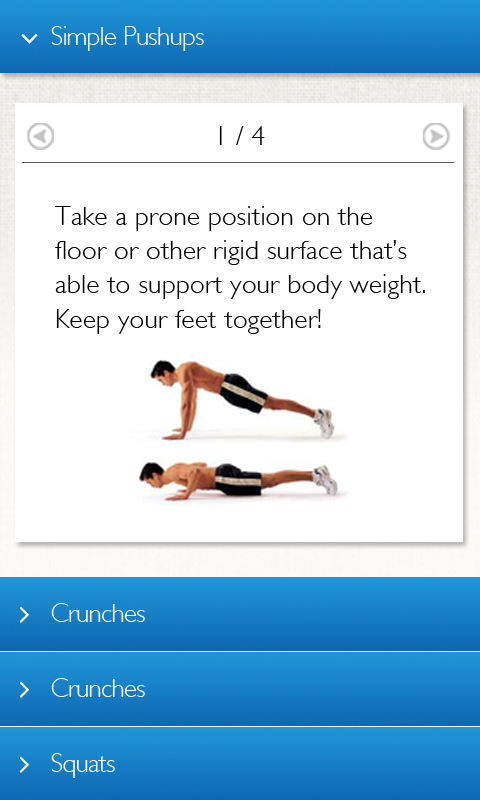
<style>
.page{position:relative;width:480px;height:800px;background:#ffffff}
.page>*{position:absolute;margin:0}
.t1{font:27px "GillSans-Light";letter-spacing:-0.03em;color:#ffffff}
.t2{font:27px "GillSans-Light";letter-spacing:0.01em;color:#000000}
.t3{font:27px/34.2px "GillSans-Light";letter-spacing:0.01em;color:#000000}
</style>
<div class="page">
<p class="t1" style="left:51px;top:26px;width:153px;height:25px">Simple Pushups</p>
<p class="t2" style="left:219px;top:126px;width:46px;height:19px">1 / 4</p>
<p class="t3" style="left:55px;top:206px;width:370px;height:128px">Take a prone position on the <br>floor or other rigid surface that’s<br>able to support your body weight.<br>Keep your feet together!</p>
<p class="t1" style="left:51px;top:603px;width:94px;height:19px">Crunches</p>
<p class="t1" style="left:51px;top:678px;width:94px;height:19px">Crunches</p>
<p class="t1" style="left:51px;top:753px;width:64px;height:25px">Squats</p>
</div>
